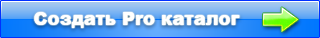
<style>
.page{position:relative;width:320px;height:38px}
.page>*{position:absolute;margin:0}
.t1{font:18px "Arial-Black";color:#ffffff}
</style>
<div class="page">
<p class="t1" style="left:34px;top:12px;width:206px;height:16px">Создать Pro каталог</p>
</div>
